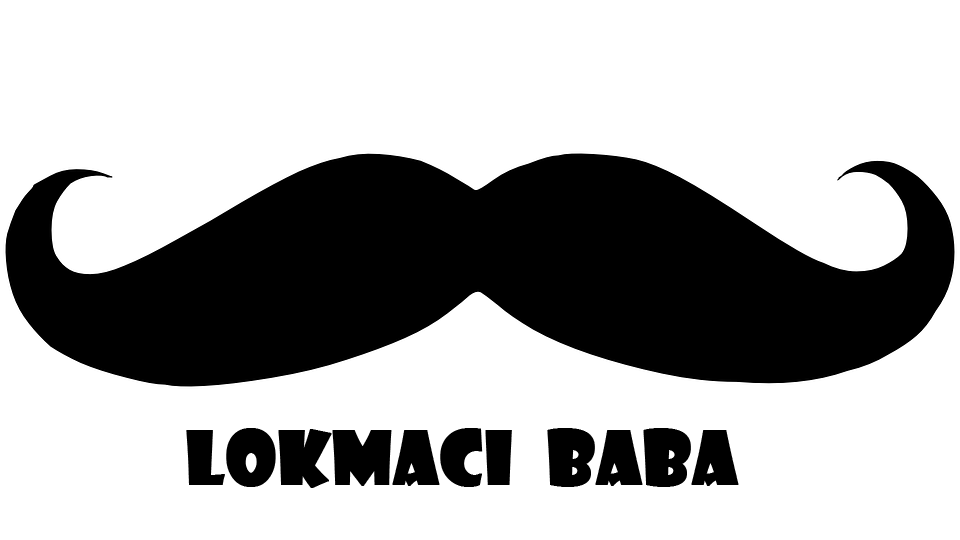
<style>
.page{position:relative;width:960px;height:540px;background:#ffffff}
.page>*{position:absolute;margin:0}
.t1{font:72px "ShowcardGothic-Reg";color:#000000;font-weight:bold}
</style>
<div class="page">
<p class="t1" style="left:186px;top:428px;width:553px;height:60px">Lokmacı  Baba</p>
</div>
